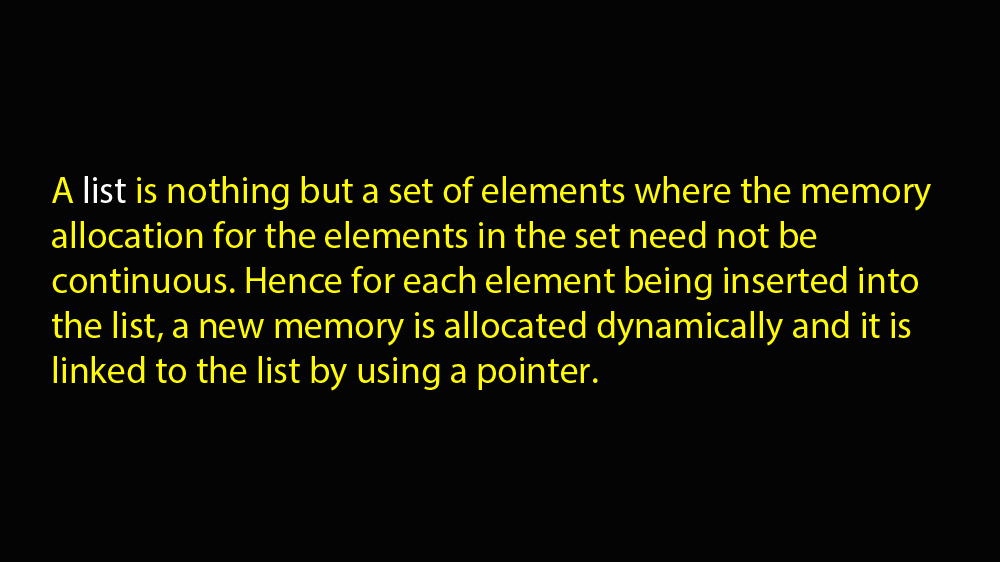
<style>
.page{position:relative;width:1000px;height:562px;background:#050404}
.page>*{position:absolute;margin:0}
.t1{font:37.5px "MyriadPro-Regular";color:#fefb04}
.t2{font:37.5px "MyriadPro-Regular";color:#fefefe}
</style>
<div class="page">
<p class="t1" style="left:52px;top:176px;width:879px;height:215px">A <span class="t2">list </span>is nothing but a set of elements where the memory allocation for the elements in the set need not be continuous. Hence for each element being inserted into the list, a new memory is allocated dynamically and it is linked to the list by using a pointer.</p>
</div>
